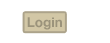
<style>
.page{position:relative;width:110px;height:43px;background:#ffffff}
.page>*{position:absolute;margin:0}
.t1{font:13.5px "HelveticaNeue-Bold";color:#9b937b}
</style>
<div class="page">
<p class="t1" style="left:27px;top:17px;width:35px;height:13px">Login</p>
</div>
